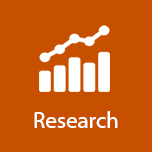
<style>
.page{position:relative;width:152px;height:152px;background:#c75000}
.page>*{position:absolute;margin:0}
.t1{font:23px "MyriadHebrew-Regular";color:#ffffff}
</style>
<div class="page">
<p class="t1" style="left:34px;top:111px;width:84px;height:17px">Research</p>
</div>
